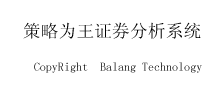
<style>
.page{position:relative;width:217px;height:93px;background:#ffffff}
.page>*{position:absolute;margin:0}
.t1{font:17.8px "SimSun";color:#000000}
.t2{font:12px "SimSun"}
</style>
<div class="page">
<p class="t1" style="left:23px;top:22px;width:178px;height:17px">策略为王证券分析系统</p>
<p class="t2" style="left:34px;top:62px;width:168px;height:11px">CopyRight  Balang Technology</p>
</div>
